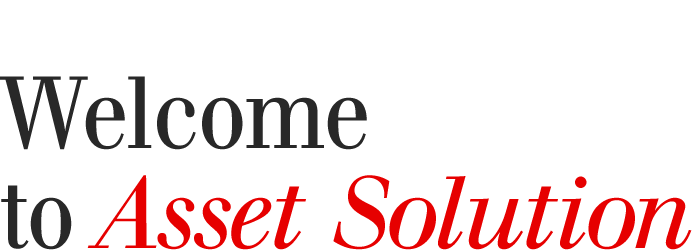
<style>
.page{position:relative;width:692px;height:250px;background:#ffffff}
.page>*{position:absolute;margin:0}
.t1{font:100px/100px "WalbaumCom-Italic";color:#e60000}
.t2{font:100px/100px "UBSHeadline";color:#282828}
</style>
<div class="page">
<p class="t1" style="left:0px;top:76px;width:692px;height:174px"><span class="t2">Welcome <br>to </span>Asset Solution</p>
</div>
